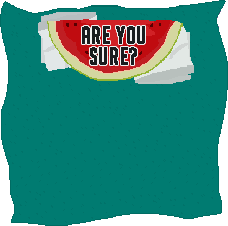
<style>
.page{position:relative;width:228px;height:226px;background:#007b71}
.page>*{position:absolute;margin:0}
.t1{font:22.9px/20.8px "BigNoodleTitling";letter-spacing:0.025em;color:#1a1d1f;font-weight:bold}
</style>
<div class="page">
<p class="t1" style="left:82px;top:26px;width:63px;height:39px;text-align:center">Are you<br>sure?</p>
</div>
